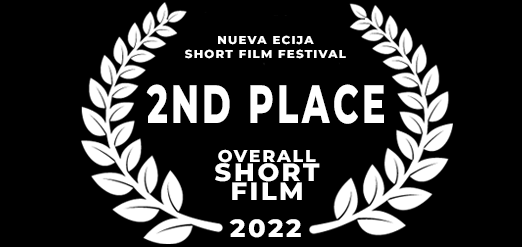
<style>
.page{position:relative;width:522px;height:247px;background:#000000}
.page>*{position:absolute;margin:0}
.t1{font:11.5px "Montserrat-ExtraBold";letter-spacing:0.1em;color:#ffffff}
.t2{font:53.8px "Montserrat-ExtraBold";letter-spacing:0.1em;color:#ffffff;scale:0.65 1}
.t3{font:25px/19px "Montserrat-ExtraBold";letter-spacing:0.1em;color:#ffffff;scale:1.03 1}
.t4{font:17px "Montserrat-ExtraBold";letter-spacing:0.1em;color:#ffffff;scale:1.03 1}
.t5{font:25px "Montserrat-ExtraBold";letter-spacing:0.1em;color:#ffffff}
</style>
<div class="page">
<p class="t1" style="left:185px;top:35px;width:161px;height:24px;text-align:center">NUEVA ECIJA<br>SHORT FILM FESTIVAL</p>
<p class="t2" style="left:146px;top:84px;width:238px;height:40px">2ND PLACE</p>
<p class="t3" style="left:215px;top:149px;width:105px;height:51px;text-align:center"><span class="t4">OVERALL<br></span>SHORT<br>FILM</p>
<p class="t5" style="left:229px;top:219px;width:72px;height:19px">2022</p>
</div>
